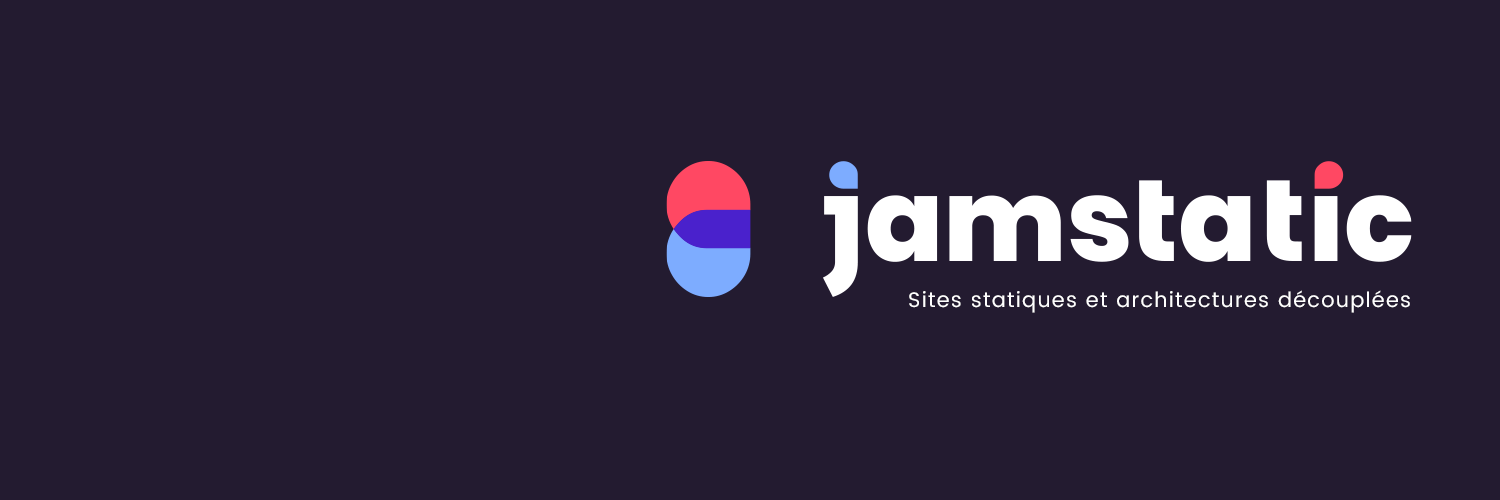
<style>
.page{position:relative;width:1500px;height:500px;background:#231b30}
.page>*{position:absolute;margin:0}
.t1{font:21px "Poppins-Regular";letter-spacing:0.06em;color:#ffffff}
</style>
<div class="page">
<p class="t1" style="left:909px;top:290px;width:501px;height:23px">Sites statiques et architectures découplées</p>
<p class="t1" style="left:909px;top:290px;width:501px;height:23px">Sites statiques et architectures découplées</p>
</div>
